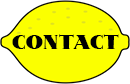
<style>
.page{position:relative;width:130px;height:84px;background:#fbff00}
.page>*{position:absolute;margin:0}
.t1{font:20px "Vogue";color:#000000}
</style>
<div class="page">
<p class="t1" style="left:12px;top:34px;width:107px;height:15px">CONTACT</p>
</div>
